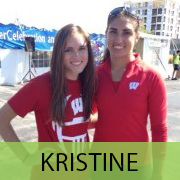
<style>
.page{position:relative;width:180px;height:180px}
.page>*{position:absolute;margin:0}
.t1{font:26.7px "MyriadPro-Regular";color:#030303}
</style>
<div class="page">
<p class="t1" style="left:42px;top:153px;width:96px;height:18px">KRISTINE</p>
</div>
